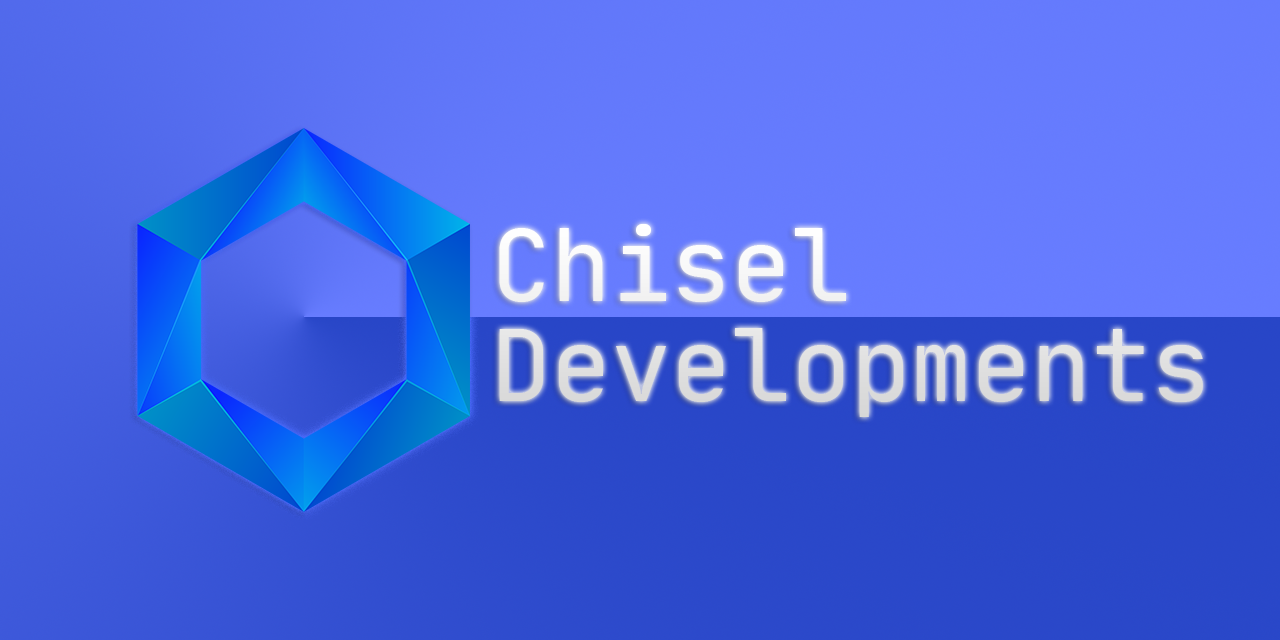
<style>
.page{position:relative;width:1280px;height:640px}
.page>*{position:absolute;margin:0}
.t1{font:100px/100.3px "JetBrainsMonoNerdFontCo-Regular";color:#e3e3e3}
</style>
<div class="page">
<p class="t1" style="left:499px;top:224px;width:704px;height:193px">Chisel<br>Developments</p>
</div>
